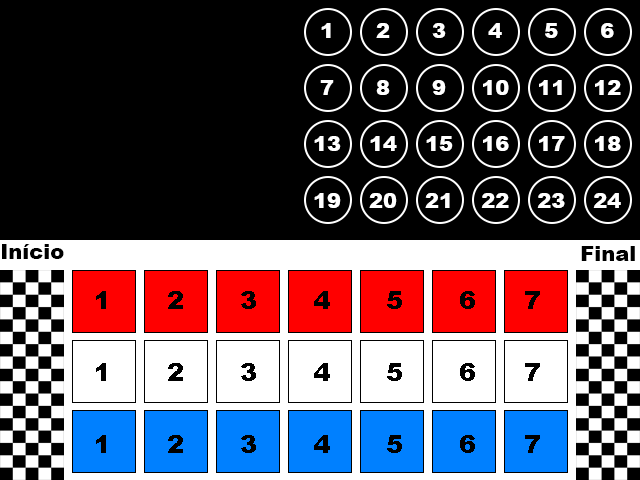
<style>
.page{position:relative;width:640px;height:480px;background:#000000}
.page>*{position:absolute;margin:0}
.t1{font:21px "Arial-Black";color:#ffffff}
.t2{font:21px "Arial-Black";color:#000000}
</style>
<div class="page">
<p class="t1" style="left:314px;top:23px;width:307px;height:185px">1      2      3      4      5      6<br><br> 7      8      9     10    11    12<br><br>13    14    15    16    17    18<br><br>19    20    21    22    23    24</p>
<p class="t2" style="left:2px;top:244px;width:62px;height:15px">Início</p>
<p class="t2" style="left:581px;top:246px;width:54px;height:15px">Final</p>
</div>
